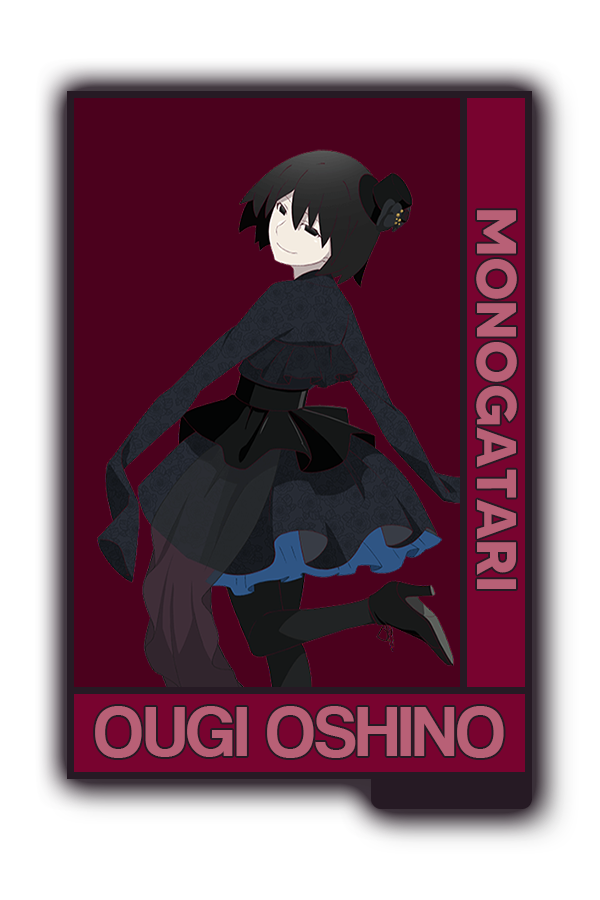
<style>
.page{position:relative;width:600px;height:900px;background:#4b011d}
.page>*{position:absolute;margin:0}
.t1{font:55.8px "MADETOMMY-Bold";color:#b86076}
.t2{font:73.3px "CoolveticaRg-Regular";color:#b86076}
</style>
<div class="page">
<p class="t1" style="left:476px;top:210px;width:41px;height:379px;rotate:90deg">MONOGATARI</p>
<p class="t2" style="left:95px;top:706px;width:409px;height:52px">OUGI OSHINO</p>
</div>
